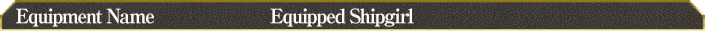
<style>
.page{position:relative;width:705px;height:31px}
.page>*{position:absolute;margin:0}
.t1{font:20px "RyuminPro-ExBold";letter-spacing:-0.08em;color:#fef9f8}
</style>
<div class="page">
<p class="t1" style="left:16px;top:8px;width:398px;height:19px">Equipment Name                       Equipped Shipgirl</p>
</div>
